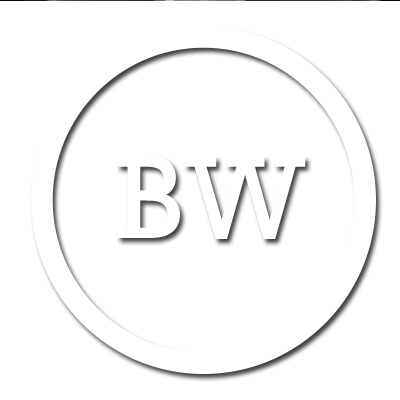
<style>
.page{position:relative;width:400px;height:400px;background:#ffffff}
.page>*{position:absolute;margin:0}
.t1{font:120px "Rockwell";color:#ffffff}
</style>
<div class="page">
<p class="t1" style="left:117px;top:155px;width:189px;height:83px">BW</p>
</div>
